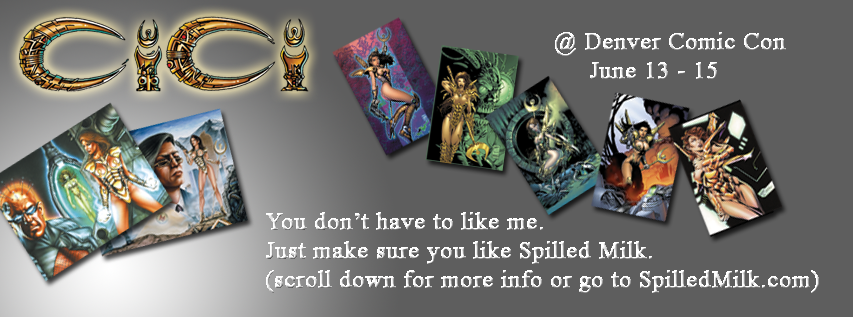
<style>
.page{position:relative;width:853px;height:317px;background:#5e5e5e}
.page>*{position:absolute;margin:0}
.t1{font:24px "TimesNewRomanPSMT";font-weight:bold}
</style>
<div class="page">
<p class="t1" style="left:555px;top:32px;width:231px;height:47px">@ Denver Comic Con<br>     June 13 - 15</p>
<p class="t1" style="left:266px;top:212px;width:553px;height:81px">You don’t have to like me.<br>Just make sure you like Spilled Milk.<br>(scroll down for more info or go to SpilledMilk.com)</p>
</div>
